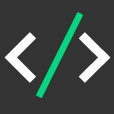
<style>
.page{position:relative;width:114px;height:114px;background:#333333}
.page>*{position:absolute;margin:0}
.t1{font:110px "AnonymousPro";letter-spacing:-0.2em;color:#00d780}
.t2{font:100px "AnonymousPro-Bold";letter-spacing:-0.15em;color:#ffffff}
</style>
<div class="page">
<p class="t1" style="left:36px;top:12px;width:47px;height:86px">/</p>
<p class="t2" style="left:4px;top:32px;width:107px;height:51px">&lt; &gt;</p>
</div>
